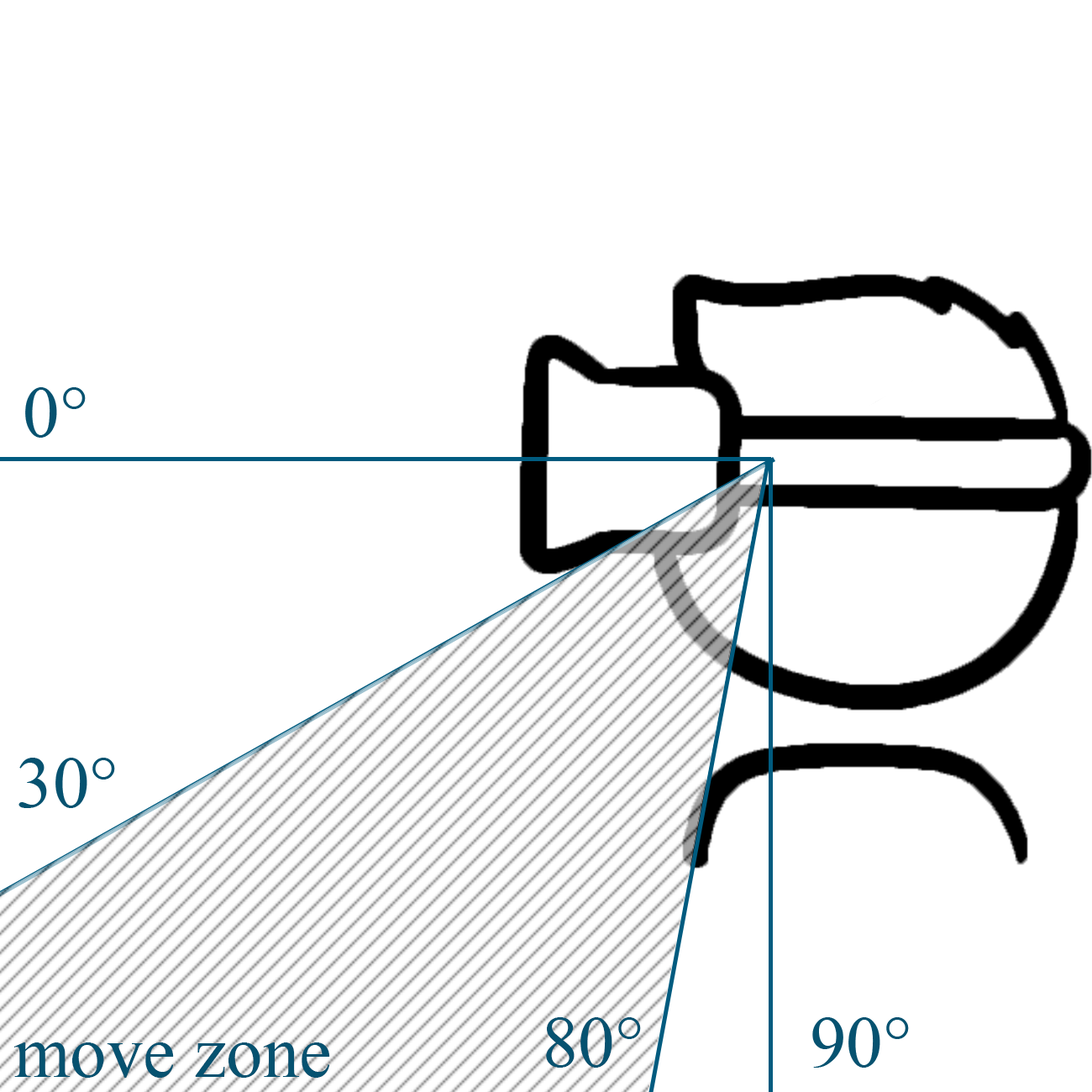
<style>
.page{position:relative;width:1092px;height:1092px;background:#ffffff}
.page>*{position:absolute;margin:0}
.t1{font:73.1px "TimesNewRomanPSMT";color:#065270}
</style>
<div class="page">
<p class="t1" style="left:25px;top:387px;width:61px;height:51px">0°</p>
<p class="t1" style="left:18px;top:758px;width:97px;height:50px">30°</p>
<p class="t1" style="left:546px;top:1017px;width:95px;height:51px">80°</p>
<p class="t1" style="left:812px;top:1017px;width:97px;height:51px">90°</p>
<p class="t1" style="left:13px;top:1042px;width:317px;height:36px">move zone</p>
</div>
